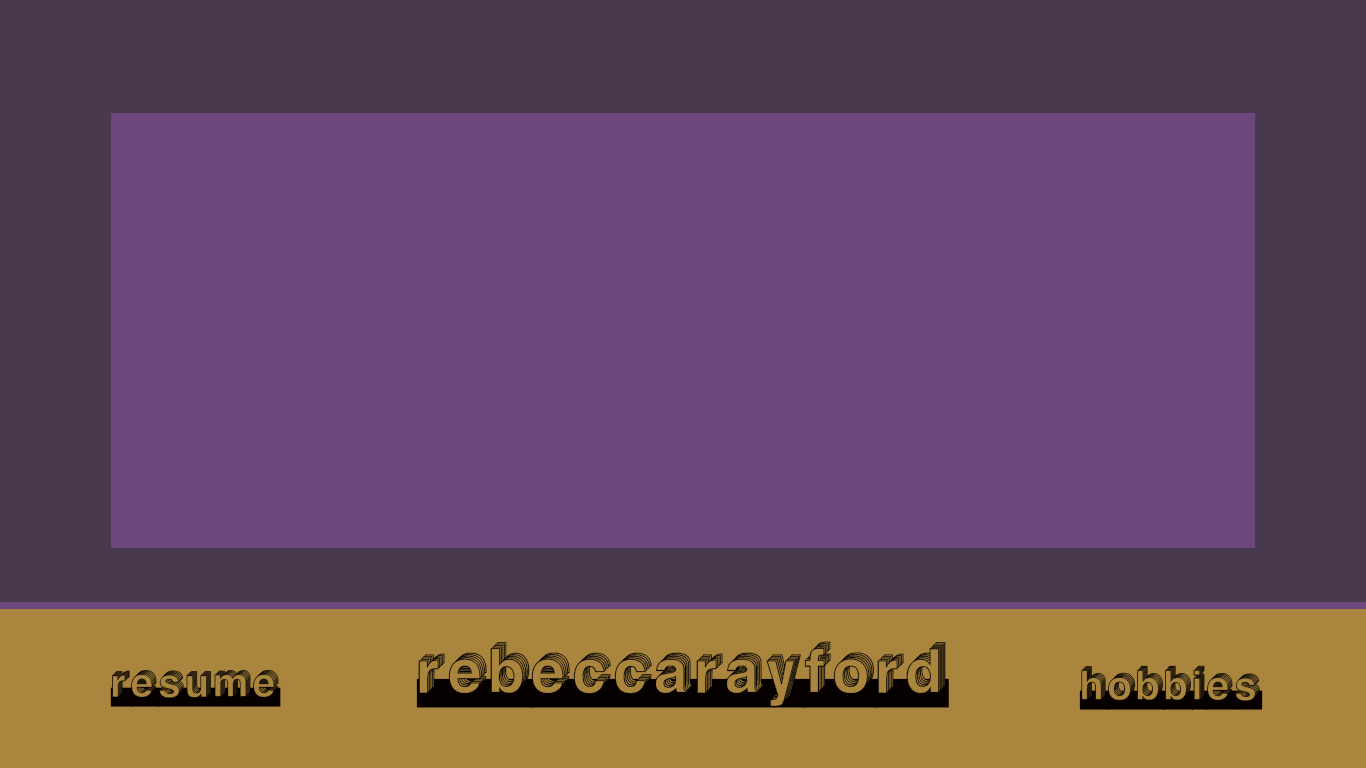
<style>
.page{position:relative;width:1366px;height:768px;background:#6e467e}
.page>*{position:absolute;margin:0}
.t1{font:72px "Level";color:#070000}
.t2{font:48px "Level";color:#070000}
</style>
<div class="page">
<p class="t1" style="left:416px;top:641px;width:533px;height:67px">RebeccaRayford</p>
<p class="t2" style="left:1079px;top:665px;width:184px;height:45px">hobbies</p>
<p class="t2" style="left:110px;top:670px;width:171px;height:37px">Resume</p>
</div>
